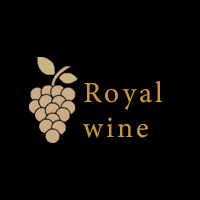
<style>
.page{position:relative;width:200px;height:200px;background:#000000}
.page>*{position:absolute;margin:0}
.t1{font:29.2px "MinionVariableConcept-Roman";letter-spacing:0.1em;color:#c8963d}
</style>
<div class="page">
<p class="t1" style="left:83px;top:81px;width:79px;height:57px">Royal <br>wine</p>
</div>
